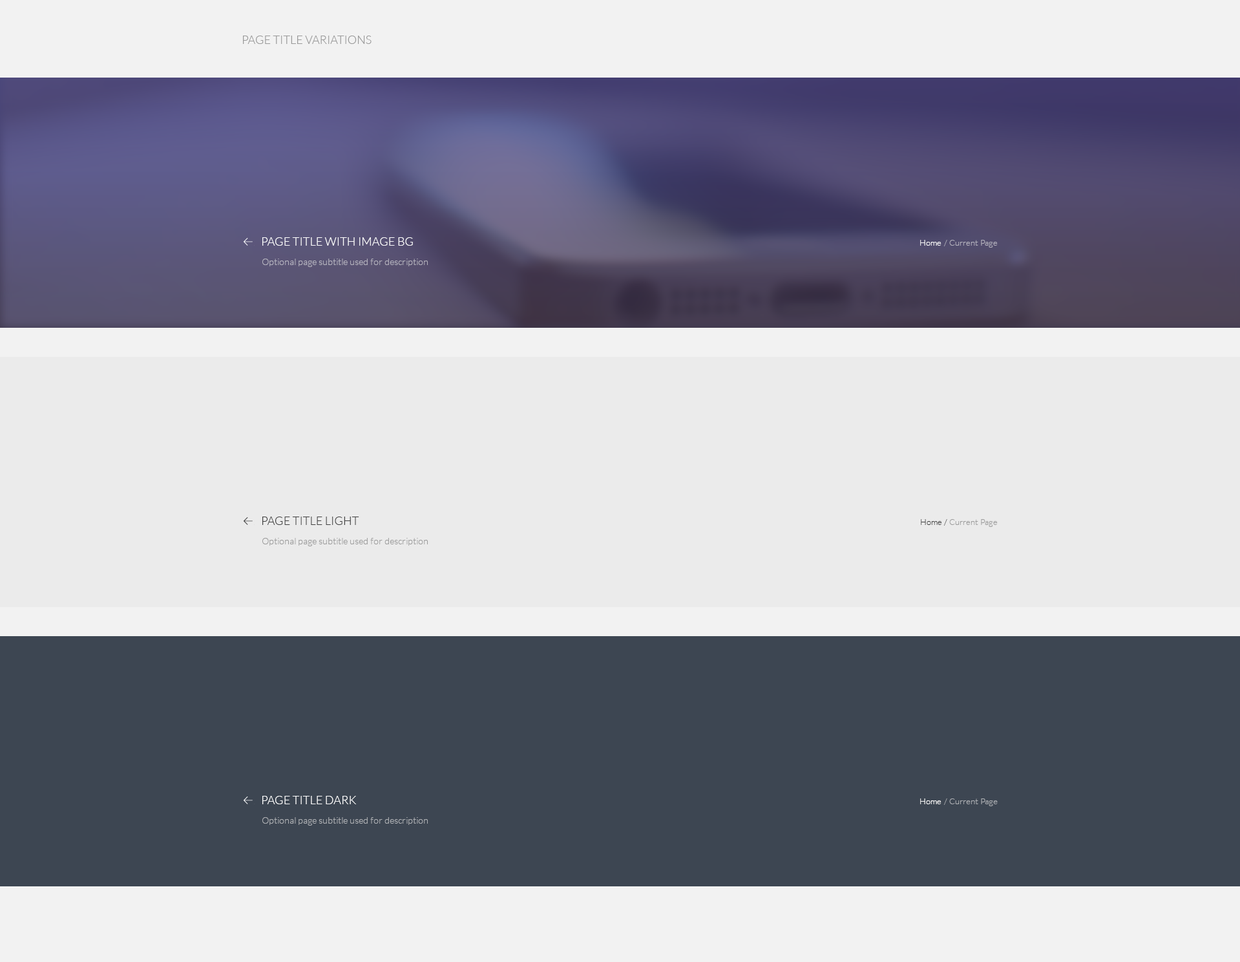
<style>
.page{position:relative;width:1240px;height:962px;background:#ebebeb}
.page>*{position:absolute;margin:0}
.t1{font:11.6px "Lato-Light";color:#999999;text-transform:uppercase}
.t2{font:11.6px "Lato-Light";color:#ffffff;text-transform:uppercase}
.t3{font:8.4px "Lato-Light";color:#fefefe}
.t4{font:8.4px "Lato-Light";color:#b6b4bf}
.t5{font:9px "Lato-Light";color:#b9b7c2}
.t6{font:11.6px "Lato-Light";color:#404040;text-transform:uppercase}
.t7{font:8.4px "Lato-Light";color:#999999}
.t8{font:8.4px "Lato-Light";color:#404040}
.t9{font:9px "Lato-Light";color:#999999}
.t10{font:8.5px "Lato-Light";color:#fefefe}
.t11{font:8.5px "Lato-Light";color:#b0b2b6}
.t12{font:9px "Lato-Light";color:#b0b2b6}
</style>
<div class="page">
<p class="t1" style="left:243px;top:36px;width:129px;height:8px">Page Title Variations</p>
<p class="t2" style="left:262px;top:237px;width:151px;height:9px">Page Title with Image Bg</p>
<p class="t3" style="left:920px;top:240px;width:22px;height:6px">Home</p>
<p class="t4" style="left:943px;top:240px;width:55px;height:8px">/ Current Page</p>
<p class="t5" style="left:262px;top:258px;width:166px;height:9px">Optional page subtitle used for description</p>
<p class="t6" style="left:262px;top:516px;width:97px;height:9px">Page Title Light</p>
<p class="t7" style="left:921px;top:519px;width:77px;height:8px"><span class="t8">Home / </span>Current Page</p>
<p class="t9" style="left:262px;top:538px;width:166px;height:8px">Optional page subtitle used for description</p>
<p class="t2" style="left:262px;top:795px;width:95px;height:9px">Page Title Dark</p>
<p class="t10" style="left:920px;top:798px;width:22px;height:6px">Home</p>
<p class="t11" style="left:943px;top:798px;width:55px;height:8px">/ Current Page</p>
<p class="t12" style="left:262px;top:817px;width:166px;height:8px">Optional page subtitle used for description</p>
</div>
